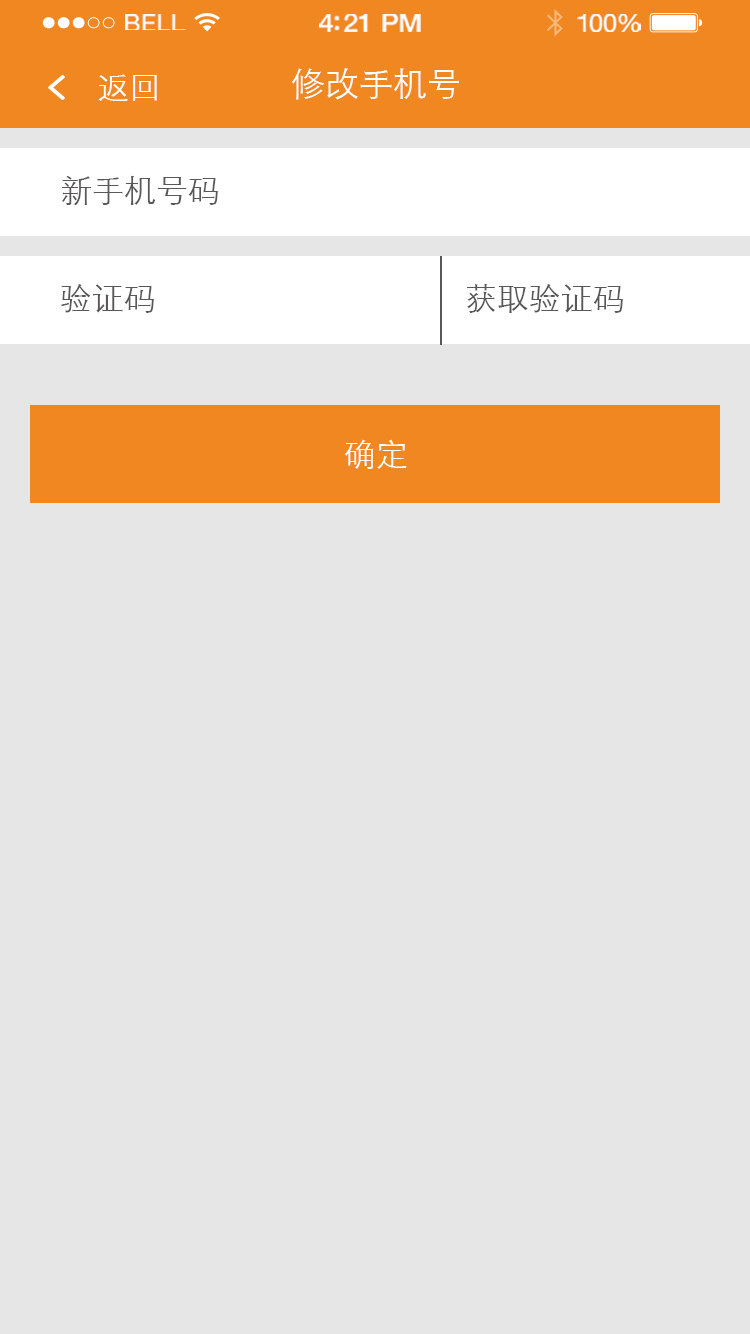
<style>
.page{position:relative;width:750px;height:1334px;background:#e6e6e6}
.page>*{position:absolute;margin:0}
.t1{font:23.3px "HelveticaNeue";letter-spacing:0.02em;color:#ffffff;scale:1.06 1}
.t2{font:25.3px "HelveticaNeue-Medium";letter-spacing:-0.02em;color:#ffffff;scale:1.06 1}
.t3{font:24.3px "HelveticaNeue";letter-spacing:-0.02em;color:#ffffff;scale:1.06 1}
.t4{font:32px "STXihei";color:#ffffff}
.t5{font:34px "STXihei";color:#ffffff}
.t6{font:32px "STXihei";color:#595757}
</style>
<div class="page">
<p class="t1" style="left:125px;top:14px;width:61px;height:16px">BELL</p>
<p class="t2" style="left:319px;top:14px;width:102px;height:18px">4:21 PM</p>
<p class="t3" style="left:577px;top:14px;width:64px;height:18px">100%</p>
<p class="t4" style="left:98px;top:74px;width:59px;height:27px">返回</p>
<p class="t5" style="left:291px;top:68px;width:168px;height:32px">修改手机号</p>
<p class="t6" style="left:62px;top:175px;width:156px;height:30px">新手机号码</p>
<p class="t6" style="left:61px;top:284px;width:93px;height:29px">验证码</p>
<p class="t6" style="left:467px;top:284px;width:156px;height:29px">获取验证码</p>
<p class="t4" style="left:344px;top:439px;width:63px;height:30px">确定</p>
</div>
